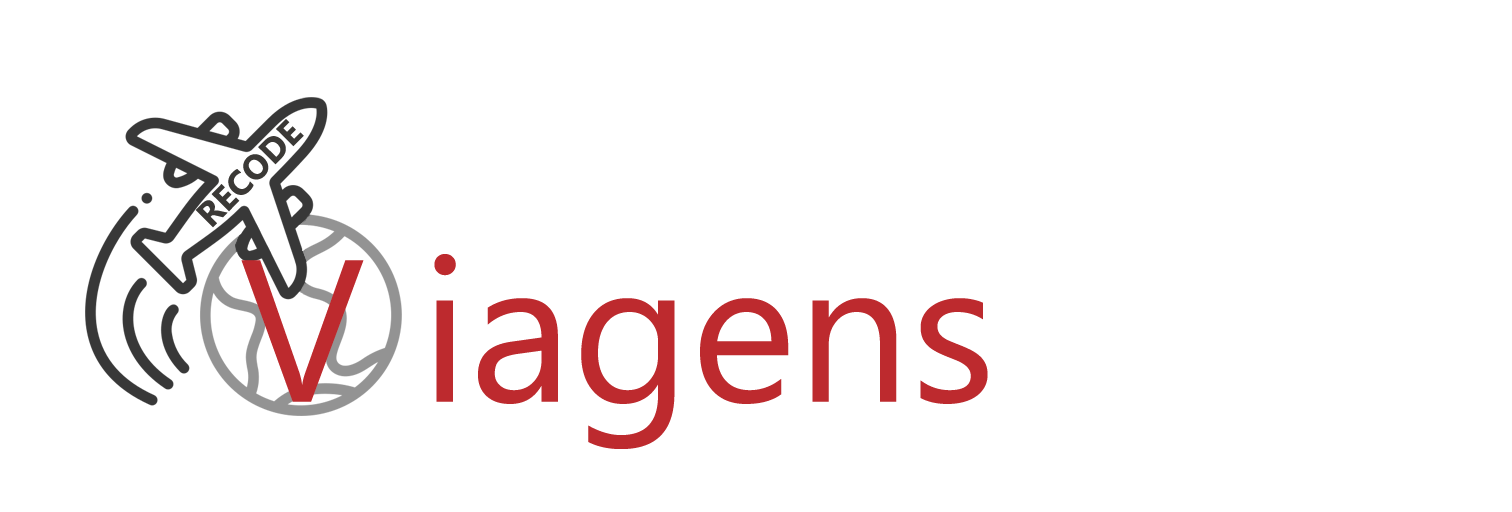
<style>
.page{position:relative;width:1512px;height:512px;background:#ffffff}
.page>*{position:absolute;margin:0}
.t1{font:34.5px "MicrosoftPhagsPa-Bold";color:#3b3936}
.t2{font:201.7px "MicrosoftPhagsPa";color:#bd2a2e}
</style>
<div class="page">
<p class="t1" style="left:195px;top:119px;width:109px;height:109px;rotate:-45deg">RECODE</p>
<p class="t2" style="left:241px;top:254px;width:747px;height:195px">V iagens</p>
</div>
